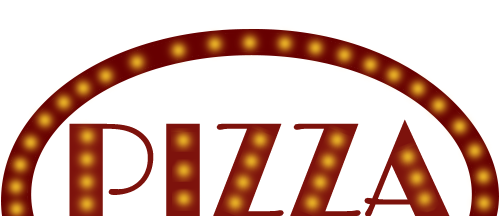
<style>
.page{position:relative;width:500px;height:216px;background:#ffffff}
.page>*{position:absolute;margin:0}
.t1{font:133.3px "Limelight";color:#7d120c}
</style>
<div class="page">
<p class="t1" style="left:69px;top:119px;width:381px;height:98px">PIZZA</p>
</div>
